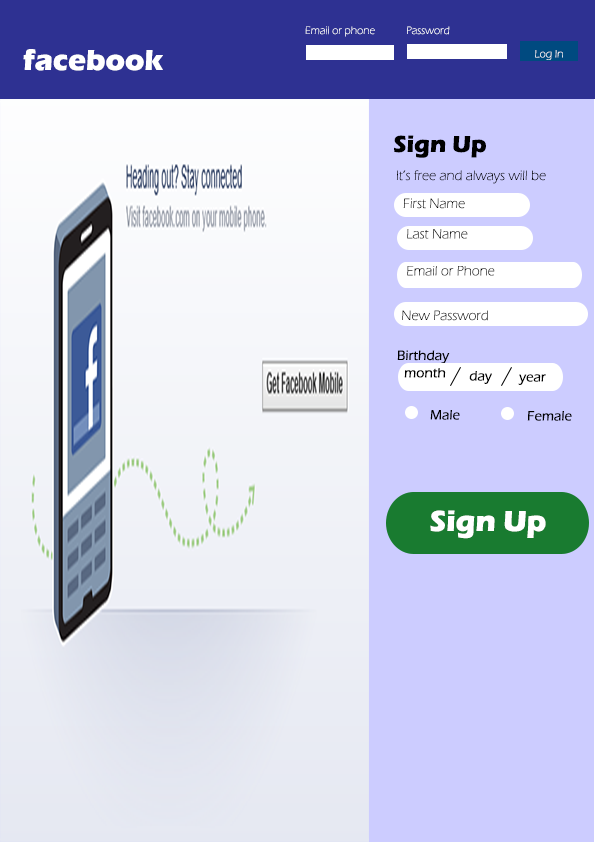
<style>
.page{position:relative;width:595px;height:842px;background:#ccccff}
.page>*{position:absolute;margin:0}
.t1{font:11px "ErasITC-Light";color:#ffffff}
.t2{font:30px "ErasITC-Bold";color:#ffffff}
.t3{font:11px "ErasITC-Light"}
.t4{font:24px "ErasITC-Bold";color:#000000}
.t5{font:14px "ErasITC-Light";color:#000000}
.t6{font:14px "ErasITC-Light";color:#232323}
.t7{font:14px "ErasITC-Medium";color:#000000}
</style>
<div class="page">
<p class="t1" style="left:305px;top:26px;width:70px;height:11px">Email or phone</p>
<p class="t1" style="left:407px;top:26px;width:43px;height:9px">Password</p>
<p class="t2" style="left:23px;top:49px;width:140px;height:22px">facebook</p>
<p class="t3" style="left:535px;top:50px;width:28px;height:10px">Log In</p>
<p class="t4" style="left:394px;top:135px;width:92px;height:23px">Sign Up</p>
<p class="t5" style="left:396px;top:170px;width:150px;height:14px">It’s free and always will be</p>
<p class="t5" style="left:403px;top:198px;width:62px;height:11px">First Name</p>
<p class="t6" style="left:407px;top:229px;width:61px;height:10px">Last Name</p>
<p class="t5" style="left:407px;top:266px;width:88px;height:10px">Email or Phone</p>
<p class="t5" style="left:402px;top:310px;width:86px;height:11px">New Password</p>
<p class="t7" style="left:397px;top:350px;width:53px;height:14px">Birthday</p>
<p class="t7" style="left:404px;top:368px;width:42px;height:10px">month</p>
<p class="t7" style="left:469px;top:371px;width:23px;height:13px">day</p>
<p class="t7" style="left:518px;top:374px;width:28px;height:11px">year</p>
<p class="t7" style="left:430px;top:410px;width:30px;height:10px">Male</p>
<p class="t7" style="left:527px;top:411px;width:45px;height:10px">Female</p>
<p class="t2" style="left:430px;top:510px;width:116px;height:29px">Sign Up</p>
</div>
